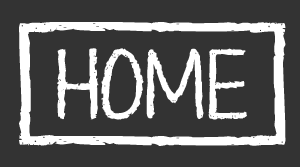
<style>
.page{position:relative;width:300px;height:167px;background:#333333}
.page>*{position:absolute;margin:0}
.t1{font:100px "KGTenThousandReasons";color:#ffffff}
.t2{font:226.4px "KGTenThousandReasons";color:#ffffff;scale:0.38 1}
.t3{font:72px "KGTenThousandReasons";color:#ffffff}
</style>
<div class="page">
<p class="t1" style="left:19px;top:22px;width:267px;height:124px">[       ]</p>
<p class="t2" style="left:45px;top:22px;width:224px;height:10px;rotate:-90deg">I</p>
<p class="t3" style="left:57px;top:48px;width:190px;height:72px">HOME</p>
<p class="t2" style="left:45px;top:136px;width:224px;height:10px;rotate:-90deg">I</p>
</div>
